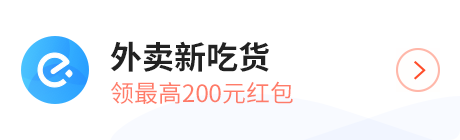
<style>
.page{position:relative;width:460px;height:140px;background:#ffffff}
.page>*{position:absolute;margin:0}
.t1{font:32px "SourceHanSansCN-Bold";color:#222222}
.t2{font:24px "SourceHanSansCN-Regular";color:#ff7c69}
</style>
<div class="page">
<p class="t1" style="left:110px;top:41px;width:159px;height:31px">外卖新吃货</p>
<p class="t2" style="left:111px;top:81px;width:182px;height:23px">领最高200元红包</p>
</div>
